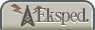
<style>
.page{position:relative;width:95px;height:30px;background:#c5c2b9}
.page>*{position:absolute;margin:0}
.t1{font:19px "RyuminPro-ExBold";letter-spacing:-0.08em;color:#6b6761;scale:0.9 1}
</style>
<div class="page">
<p class="t1" style="left:35px;top:8px;width:54px;height:17px">Eksped.</p>
</div>
